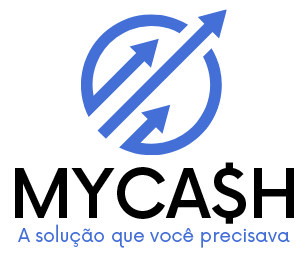
<style>
.page{position:relative;width:305px;height:256px;background:#ffffff}
.page>*{position:absolute;margin:0}
.t1{font:66.7px "Now-Medium";color:#000001}
.t2{font:18.7px "Now-Regular";color:#436fd6}
</style>
<div class="page">
<p class="t1" style="left:15px;top:162px;width:279px;height:62px">MYCA$H</p>
<p class="t2" style="left:18px;top:224px;width:272px;height:24px">A solução que você precisava</p>
</div>
